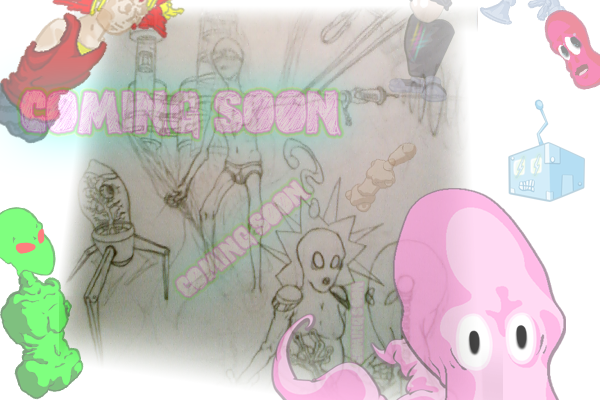
<style>
.page{position:relative;width:600px;height:400px}
.page>*{position:absolute;margin:0}
.t1{font:48px "vtksstudy"}
.t2{font:24px "vtksstudy";color:#bcb6ae}
.t3{font:12px "vtksstudy";color:#b0afa7}
</style>
<div class="page">
<p class="t1" style="left:20px;top:91px;width:320px;height:47px">Coming Soon</p>
<p class="t2" style="left:176px;top:181px;width:134px;height:116px;rotate:-41deg">Coming Soon</p>
<p class="t3" style="left:351px;top:282px;width:13px;height:81px;rotate:-90deg">Coming soon</p>
</div>
